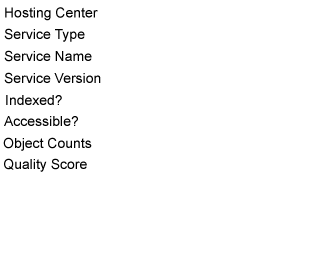
<style>
.page{position:relative;width:314px;height:270px;background:#ffffff}
.page>*{position:absolute;margin:0}
.t1{font:14px "ArialMT";color:#000000}
</style>
<div class="page">
<p class="t1" style="left:5px;top:7px;width:93px;height:14px">Hosting Center</p>
<p class="t1" style="left:4px;top:28px;width:81px;height:14px">Service Type</p>
<p class="t1" style="left:4px;top:50px;width:88px;height:12px">Service Name</p>
<p class="t1" style="left:4px;top:72px;width:97px;height:12px">Service Version</p>
<p class="t1" style="left:6px;top:95px;width:56px;height:10px">Indexed?</p>
<p class="t1" style="left:4px;top:116px;width:74px;height:10px">Accessible?</p>
<p class="t1" style="left:3px;top:137px;width:89px;height:14px">Object Counts</p>
<p class="t1" style="left:4px;top:158px;width:83px;height:14px">Quality Score</p>
</div>
